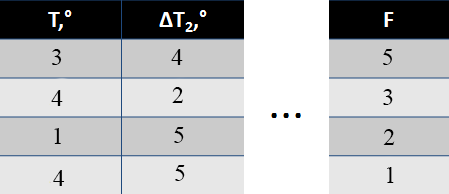
<style>
.page{position:relative;width:449px;height:194px;background:#cbcbcb}
.page>*{position:absolute;margin:0}
.t1{font:24px "TimesNewRomanPSMT";color:#000000}
</style>
<div class="page">
<p class="t1" style="left:52px;top:49px;width:10px;height:16px">3</p>
<p class="t1" style="left:171px;top:49px;width:12px;height:16px">4</p>
<p class="t1" style="left:383px;top:49px;width:9px;height:16px">5</p>
<p class="t1" style="left:172px;top:87px;width:11px;height:16px">2</p>
<p class="t1" style="left:383px;top:89px;width:10px;height:16px">3</p>
<p class="t1" style="left:51px;top:90px;width:12px;height:16px">4</p>
<p class="t1" style="left:54px;top:128px;width:7px;height:16px">1</p>
<p class="t1" style="left:174px;top:127px;width:10px;height:16px">5</p>
<p class="t1" style="left:383px;top:129px;width:12px;height:16px">2</p>
<p class="t1" style="left:53px;top:170px;width:12px;height:16px">4</p>
<p class="t1" style="left:175px;top:165px;width:10px;height:16px">5</p>
<p class="t1" style="left:387px;top:167px;width:7px;height:16px">1</p>
</div>
